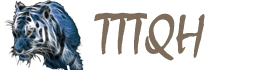
<style>
.page{position:relative;width:270px;height:70px;background:#ffffff}
.page>*{position:absolute;margin:0}
.t1{font:58.3px "Mistral";color:#7d6c5b}
</style>
<div class="page">
<p class="t1" style="left:94px;top:12px;width:111px;height:49px">TTTQH</p>
</div>
